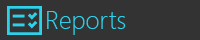
<style>
.page{position:relative;width:200px;height:40px;background:#333333}
.page>*{position:absolute;margin:0}
.t1{font:25px "SegoeUI-Light";color:#2cd1ea}
</style>
<div class="page">
<p class="t1" style="left:47px;top:11px;width:79px;height:24px">Reports</p>
</div>
